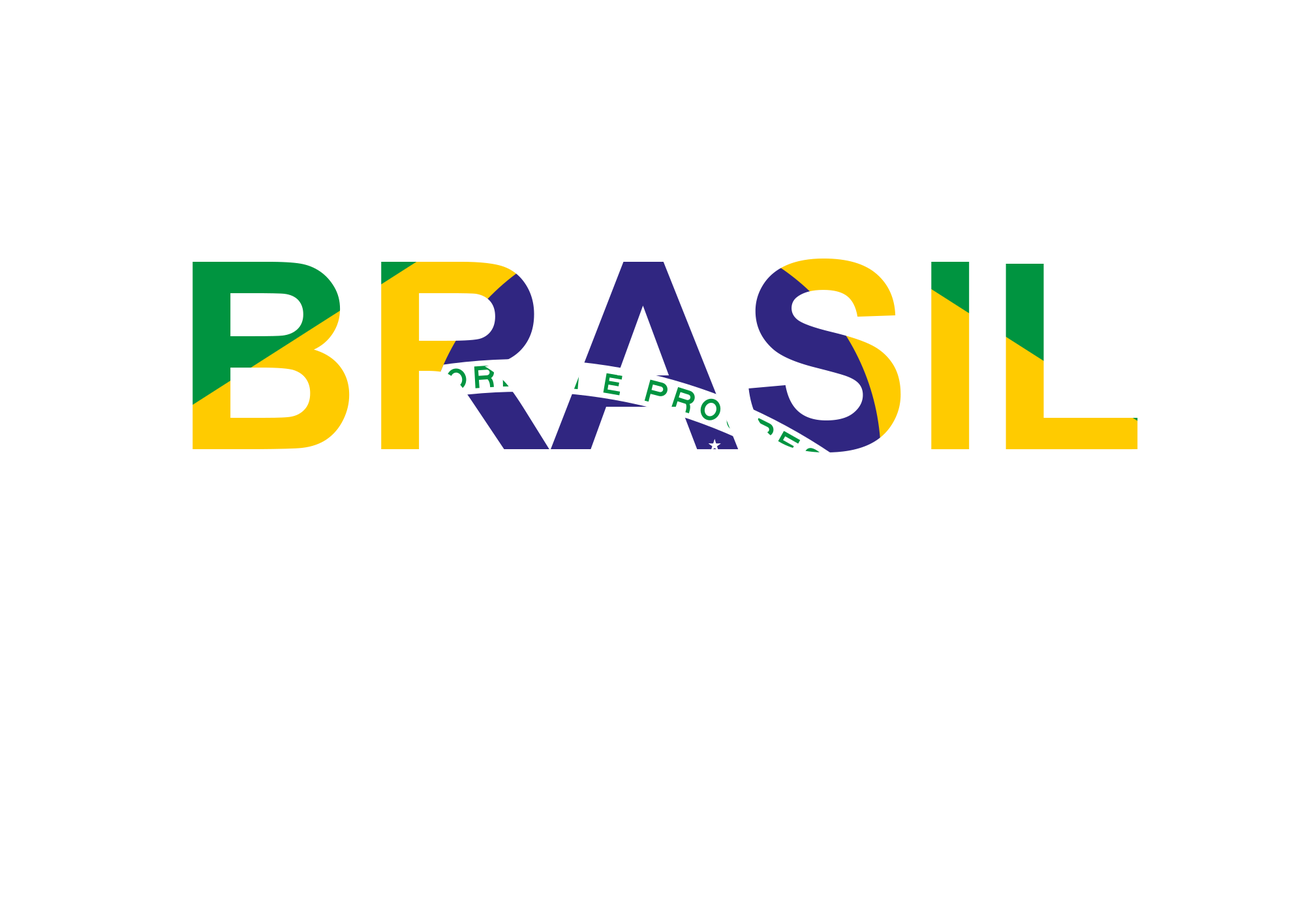
<style>
.page{position:relative;width:1305px;height:914px;background:#ffffff}
.page>*{position:absolute;margin:0}
.t1{font:261px "Arial-BoldMT"}
</style>
<div class="page">
<p class="t1" style="left:193px;top:258px;width:945px;height:194px">BRASIL</p>
</div>
